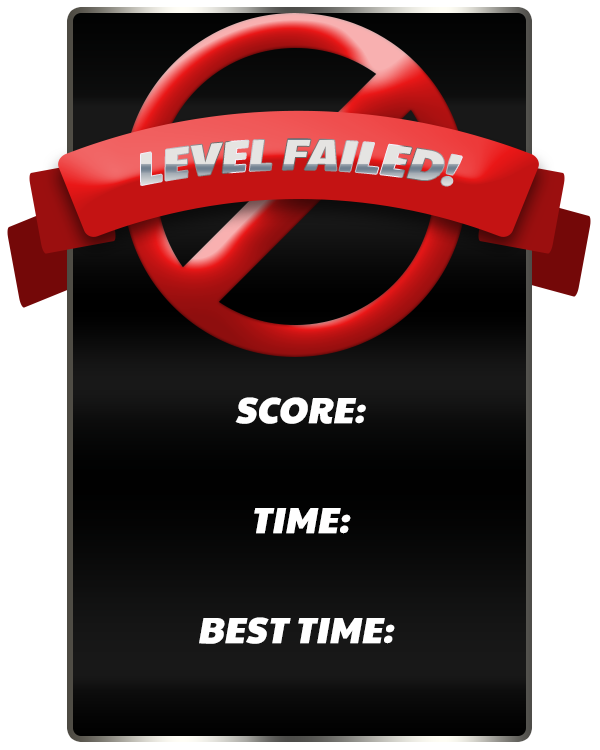
<style>
.page{position:relative;width:600px;height:750px;background:#ffffff}
.page>*{position:absolute;margin:0}
.t1{font:44.2px "PaytoneOne";font-style:italic}
.t2{font:36.3px "PaytoneOne";color:#ffffff;font-style:italic}
</style>
<div class="page">
<p class="t1" style="left:141px;top:139px;width:321px;height:47px">LEVEL FAILED!</p>
<p class="t2" style="left:235px;top:397px;width:131px;height:27px">SCORE:</p>
<p class="t2" style="left:254px;top:508px;width:97px;height:26px">TIME:</p>
<p class="t2" style="left:199px;top:617px;width:196px;height:27px">BEST TIME:</p>
</div>
